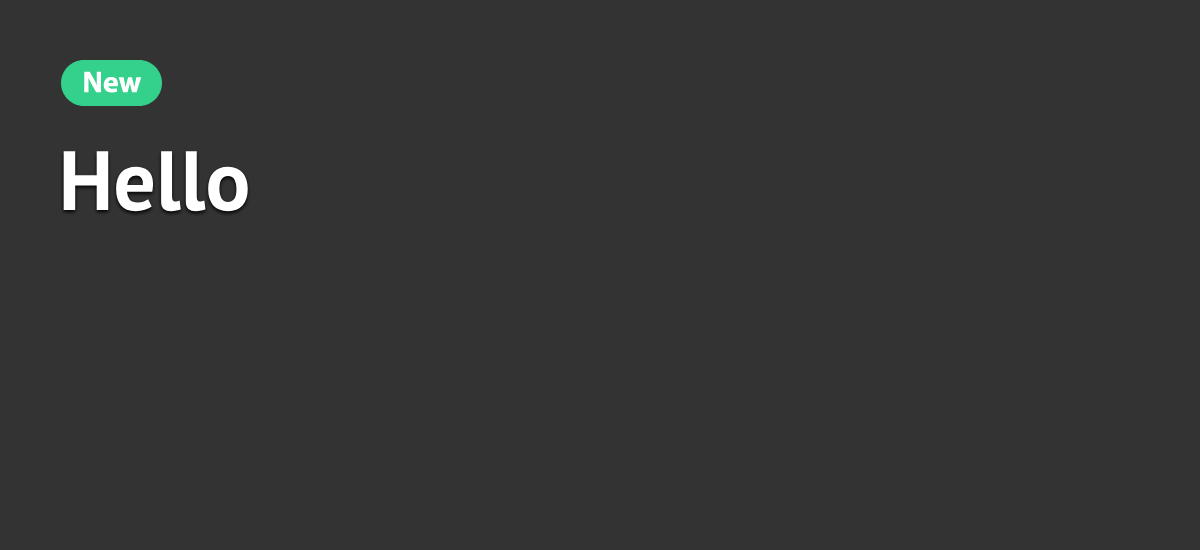
<style>
.page{position:relative;width:1200px;height:550px;background:#333333}
.page>*{position:absolute;margin:0}
.t1{font:30px "MyriadPro-Bold";color:#ffffff}
.t2{font:84px "MyriadPro-Bold";color:#ffffff}
</style>
<div class="page">
<p class="t1" style="left:84px;top:71px;width:58px;height:22px">New</p>
<p class="t2" style="left:63px;top:151px;width:185px;height:61px">Hello</p>
</div>
